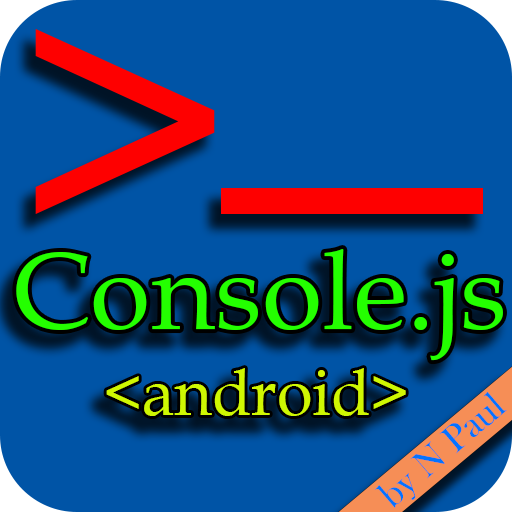
<style>
.page{position:relative;width:512px;height:512px;background:#0054a6}
.page>*{position:absolute;margin:0}
.t1{font:363.4px "BookAntiqua";color:#fe0000}
.t2{font:110.4px "BookAntiqua";color:#24ff00}
.t3{font:64.6px "BookAntiqua";color:#cff702}
.t4{font:38.5px "BaskOldFace";color:#0374ff}
</style>
<div class="page">
<p class="t1" style="left:35px;top:29px;width:180px;height:185px">&gt;</p>
<p class="t2" style="left:16px;top:249px;width:487px;height:112px">Console.js</p>
<p class="t3" style="left:106px;top:368px;width:300px;height:48px">&lt;android&gt;</p>
<p class="t4" style="left:375px;top:392px;width:132px;height:116px;rotate:-41deg">by N Paul</p>
</div>
